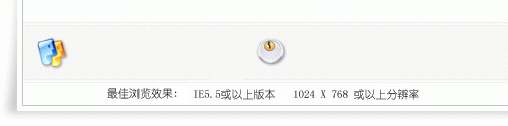
<style>
.page{position:relative;width:508px;height:126px;background:#fcfefc}
.page>*{position:absolute;margin:0}
.t1{font:11px "YouYuan";color:#000000}
.t2{font:11px "YouYuan"}
</style>
<div class="page">
<p class="t1" style="left:107px;top:88px;width:70px;height:11px">最佳浏览效果:</p>
<p class="t1" style="left:194px;top:89px;width:81px;height:11px">IE5.5或以上版本</p>
<p class="t2" style="left:294px;top:89px;width:125px;height:11px">1024 X 768 或以上分辨率</p>
</div>
